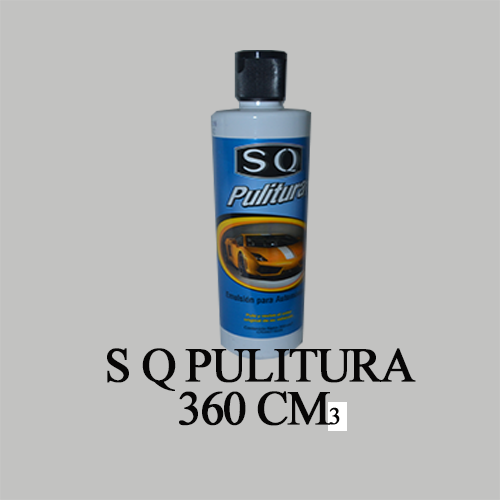
<style>
.page{position:relative;width:500px;height:500px;background:#c2c2c1}
.page>*{position:absolute;margin:0}
.t1{font:48px "TimesNewRomanPSMT";letter-spacing:-0.05em;color:#070606;font-weight:bold}
.t2{font:24px "TimesNewRomanPSMT";letter-spacing:-0.05em;color:#070606;font-weight:bold}
</style>
<div class="page">
<p class="t1" style="left:107px;top:348px;width:309px;height:78px;text-align:center">S Q PULITURA<br><br><br>360 CM<span class="t2">3</span></p>
</div>
